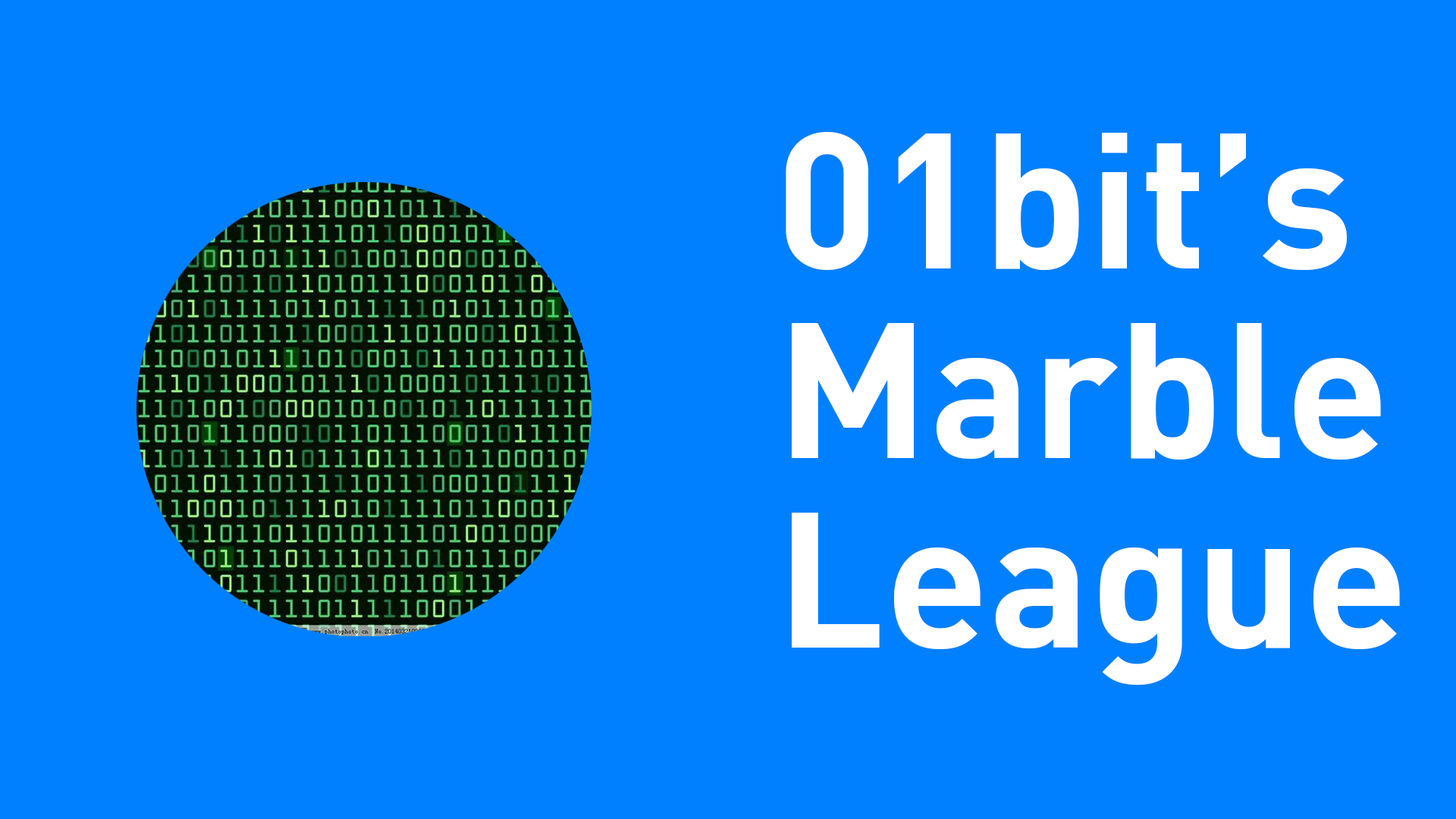
<style>
.page{position:relative;width:1456px;height:819px;background:#0080ff}
.page>*{position:absolute;margin:0}
.t1{font:189.6px/189.6px "DINPro-Bold";color:#ffffff}
</style>
<div class="page">
<p class="t1" style="left:786px;top:132px;width:614px;height:553px">01bit’s<br>Marble<br>League</p>
</div>
